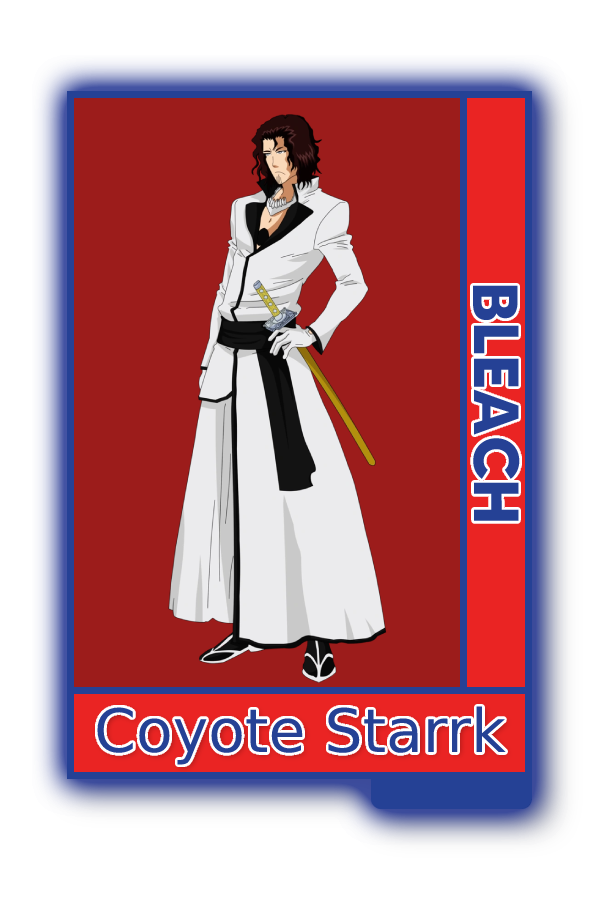
<style>
.page{position:relative;width:600px;height:900px;background:#9c1c1b}
.page>*{position:absolute;margin:0}
.t1{font:63.6px "MADETOMMY-Bold";color:#254195}
.t2{font:60px "CoolveticaRg-Regular";color:#254195}
</style>
<div class="page">
<p class="t1" style="left:473px;top:285px;width:47px;height:236px;rotate:90deg">BLEACH</p>
<p class="t2" style="left:97px;top:706px;width:409px;height:59px">Coyote Starrk</p>
</div>
